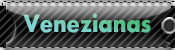
<style>
.page{position:relative;width:175px;height:50px}
.page>*{position:absolute;margin:0}
.t1{font:26px "Aharoni-Bold";scale:0.89 1}
</style>
<div class="page">
<p class="t1" style="left:23px;top:13px;width:128px;height:20px">Venezianas</p>
</div>
